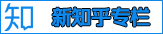
<style>
.page{position:relative;width:163px;height:34px;background:#ffffff}
.page>*{position:absolute;margin:0}
.t1{font:20px "FZRUIZHK_ZHUN--GBK1-0";letter-spacing:-0.05em;color:#0f88eb;font-weight:bold}
</style>
<div class="page">
<p class="t1" style="left:52px;top:7px;width:98px;height:20px">新知乎专栏</p>
</div>
